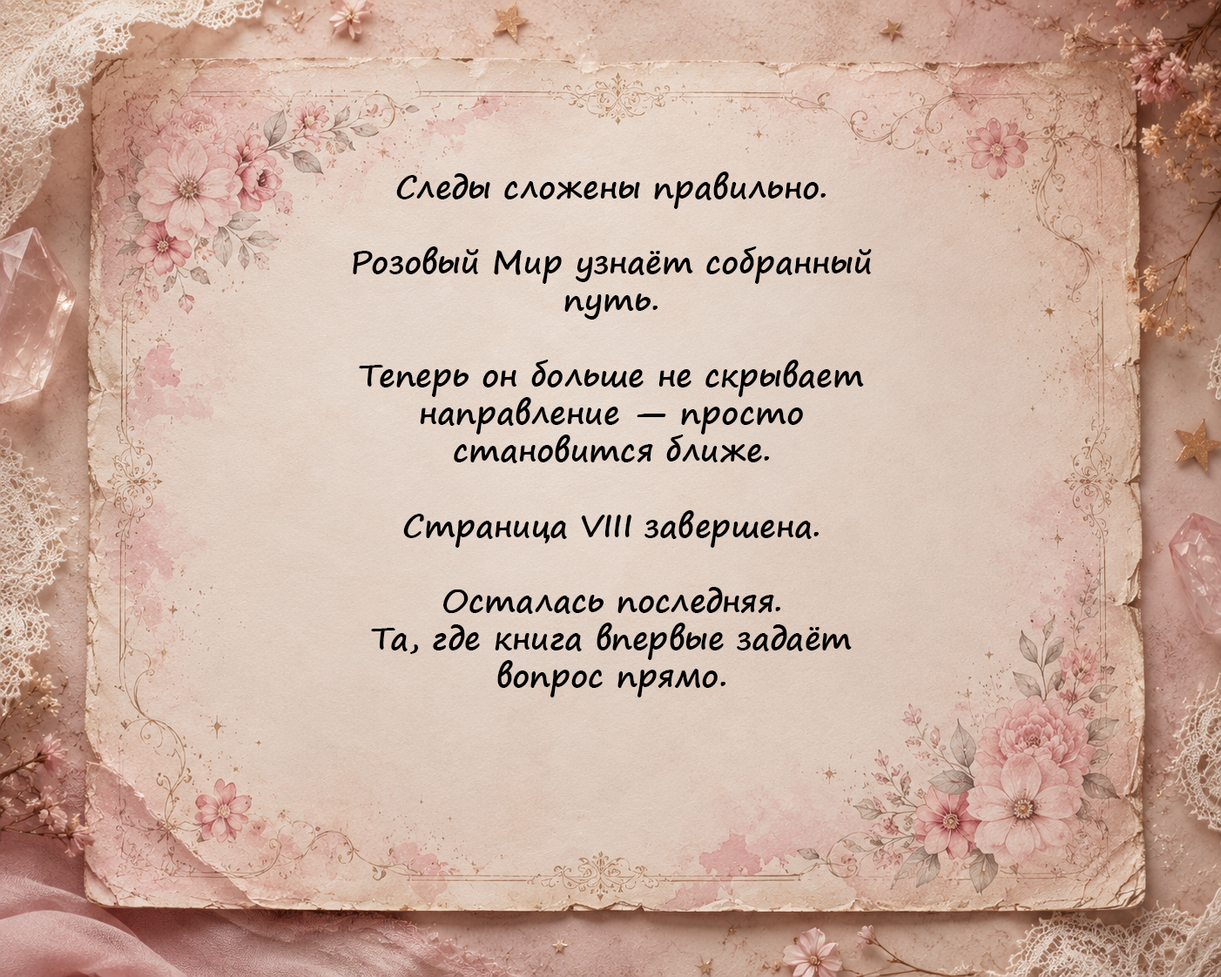
<style>
.page{position:relative;width:1221px;height:977px}
.page>*{position:absolute;margin:0}
.t1{font:31.3px "SegoePrint-Bold";color:#000000}
</style>
<div class="page">
<p class="t1" style="left:353px;top:172px;width:519px;height:525px;text-align:center">Следы сложены правильно.<br><br>Розовый Мир узнаёт собранный путь.<br><br>Теперь он больше не скрывает направление — просто становится ближе.<br><br>Страница VIII завершена.<br><br>Осталась последняя.  <br>Та, где книга впервые задаёт вопрос прямо.</p>
</div>
